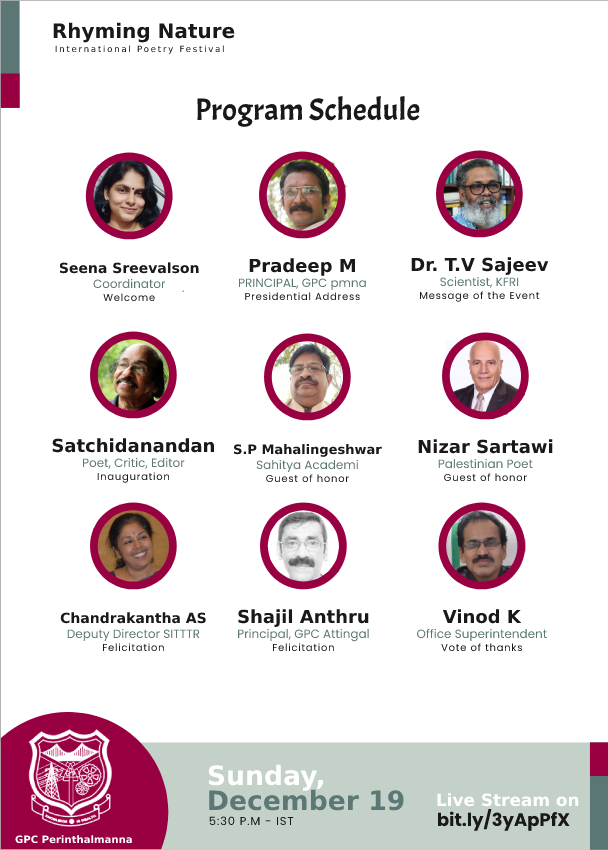
<style>
.page{position:relative;width:608px;height:850px;background:#ffffff}
.page>*{position:absolute;margin:0}
.t1{font:20px "Gilroy-ExtraBold";color:#191919}
.t2{font:8.6px "Gilroy-Light";letter-spacing:0.2em;color:#191919}
.t3{font:31px "Acme-Regular";letter-spacing:0.004em;color:#191919}
.t4{font:18px "Gilroy-ExtraBold";color:#191919}
.t5{font:14px "Gilroy-ExtraBold";color:#191919}
.t6{font:12px "Poppins-Regular";color:#5b7875}
.t7{font:10px "Poppins-Regular";letter-spacing:0.075em}
.t8{font:10px "Poppins-Regular";letter-spacing:0.075em;color:#191919}
.t9{font:13px "Gilroy-ExtraBold";color:#191919}
.t10{font:26.6px "Gilroy-ExtraBold";color:#ffffff}
.t11{font:26.6px "Gilroy-ExtraBold";color:#5b7875}
.t12{font:16.9px "Gilroy-ExtraBold";color:#ffffff}
.t13{font:18px "Poppins-Bold";color:#191919}
.t14{font:11.4px "Poppins-Regular";letter-spacing:0.075em;color:#191919}
.t15{font:10.1px "Gilroy-ExtraBold";color:#ffffff}
</style>
<div class="page">
<p class="t1" style="left:53px;top:22px;width:182px;height:21px">Rhyming Nature</p>
<p class="t2" style="left:55px;top:45px;width:169px;height:9px">International Poetry Festival</p>
<p class="t3" style="left:197px;top:96px;width:223px;height:31px">Program Schedule</p>
<p class="t4" style="left:411px;top:257px;width:138px;height:18px">Dr. T.V Sajeev</p>
<p class="t5" style="left:59px;top:262px;width:140px;height:12px">Seena Sreevalson</p>
<p class="t4" style="left:249px;top:258px;width:107px;height:18px">Pradeep M</p>
<p class="t6" style="left:93px;top:278px;width:73px;height:11px">Coordinator</p>
<p class="t6" style="left:238px;top:278px;width:128px;height:13px">PRINCIPAL, GPC pmna</p>
<p class="t6" style="left:440px;top:276px;width:79px;height:12px">Scientist, KFRI</p>
<p class="t7" style="left:103px;top:293px;width:52px;height:9px">Welcome</p>
<p class="t8" style="left:245px;top:292px;width:115px;height:9px">Presidential Address</p>
<p class="t8" style="left:420px;top:291px;width:120px;height:11px">Message of the Event</p>
<p class="t4" style="left:52px;top:438px;width:162px;height:15px">Satchidanandan</p>
<p class="t9" style="left:234px;top:444px;width:148px;height:13px">S.P Mahalingeshwar</p>
<p class="t4" style="left:418px;top:439px;width:135px;height:15px">Nizar Sartawi</p>
<p class="t6" style="left:82px;top:457px;width:103px;height:12px">Poet, Critic, Editor</p>
<p class="t6" style="left:256px;top:459px;width:102px;height:14px">Sahitya Academi</p>
<p class="t6" style="left:438px;top:458px;width:95px;height:11px">Palestinian Poet</p>
<p class="t8" style="left:97px;top:472px;width:73px;height:11px">Inauguration</p>
<p class="t8" style="left:444px;top:473px;width:83px;height:9px">Guest of honor</p>
<p class="t8" style="left:266px;top:474px;width:83px;height:9px">Guest of honor</p>
<p class="t5" style="left:60px;top:612px;width:146px;height:12px">Chandrakantha AS</p>
<p class="t4" style="left:238px;top:609px;width:131px;height:18px">Shajil Anthru</p>
<p class="t4" style="left:442px;top:609px;width:80px;height:15px">Vinod K</p>
<p class="t6" style="left:67px;top:628px;width:133px;height:14px">Deputy Director SITTTR</p>
<p class="t6" style="left:238px;top:628px;width:131px;height:14px">Principal, GPC Attingal</p>
<p class="t6" style="left:416px;top:628px;width:131px;height:14px">Office Superintendent</p>
<p class="t8" style="left:103px;top:643px;width:61px;height:9px">Felicitation</p>
<p class="t8" style="left:273px;top:643px;width:61px;height:9px">Felicitation</p>
<p class="t8" style="left:441px;top:643px;width:81px;height:9px">Vote of thanks</p>
<p class="t10" style="left:208px;top:764px;width:115px;height:27px">Sunday,</p>
<p class="t11" style="left:209px;top:789px;width:195px;height:22px">December 19</p>
<p class="t12" style="left:437px;top:793px;width:142px;height:14px">Live Stream on</p>
<p class="t13" style="left:438px;top:808px;width:132px;height:23px">bit.ly/3yApPfX</p>
<p class="t14" style="left:209px;top:816px;width:85px;height:10px">5:30 P.M - IST</p>
<p class="t15" style="left:15px;top:835px;width:117px;height:9px">GPC Perinthalmanna</p>
</div>
